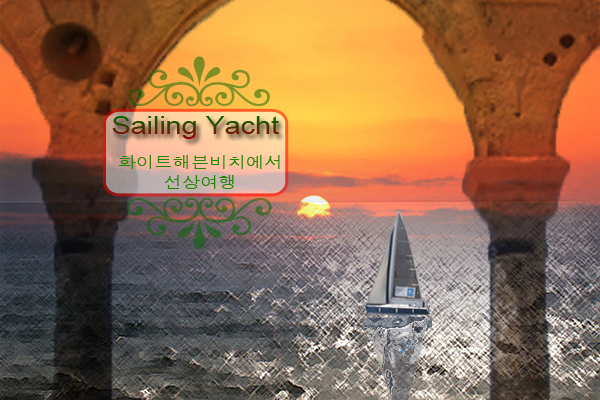
<style>
.page{position:relative;width:600px;height:400px}
.page>*{position:absolute;margin:0}
.t1{font:25px "ArialMT";scale:1.15 1}
.t2{font:16px/19.8px "Dotum";color:#228800;scale:1.15 1}
</style>
<div class="page">
<p class="t1" style="left:112px;top:116px;width:167px;height:23px">Sailing Yacht</p>
<p class="t2" style="left:119px;top:155px;width:161px;height:34px;text-align:center">화이트해븐비치에서<br>선상여행</p>
</div>
